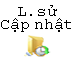
<style>
.page{position:relative;width:71px;height:58px;background:#ffffff}
.page>*{position:absolute;margin:0}
.t1{font:16px/13.3px "CourierNewPSMT";color:#000000}
</style>
<div class="page">
<p class="t1" style="left:1px;top:5px;width:71px;height:27px;text-align:center">L.sử<br>Cập nhật</p>
</div>
